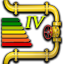
<style>
.page{position:relative;width:64px;height:64px;background:#ffffff}
.page>*{position:absolute;margin:0}
.t1{font:16px "TrajanPro-Bold";color:#deff01;font-style:italic}
</style>
<div class="page">
<p class="t1" style="left:25px;top:16px;width:21px;height:12px">IV</p>
</div>
